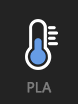
<style>
.page{position:relative;width:78px;height:104px;background:#232323}
.page>*{position:absolute;margin:0}
.t1{font:14px "SegoeUI";color:#7c7c7c;font-weight:bold}
</style>
<div class="page">
<p class="t1" style="left:27px;top:82px;width:25px;height:11px">PLA</p>
</div>
